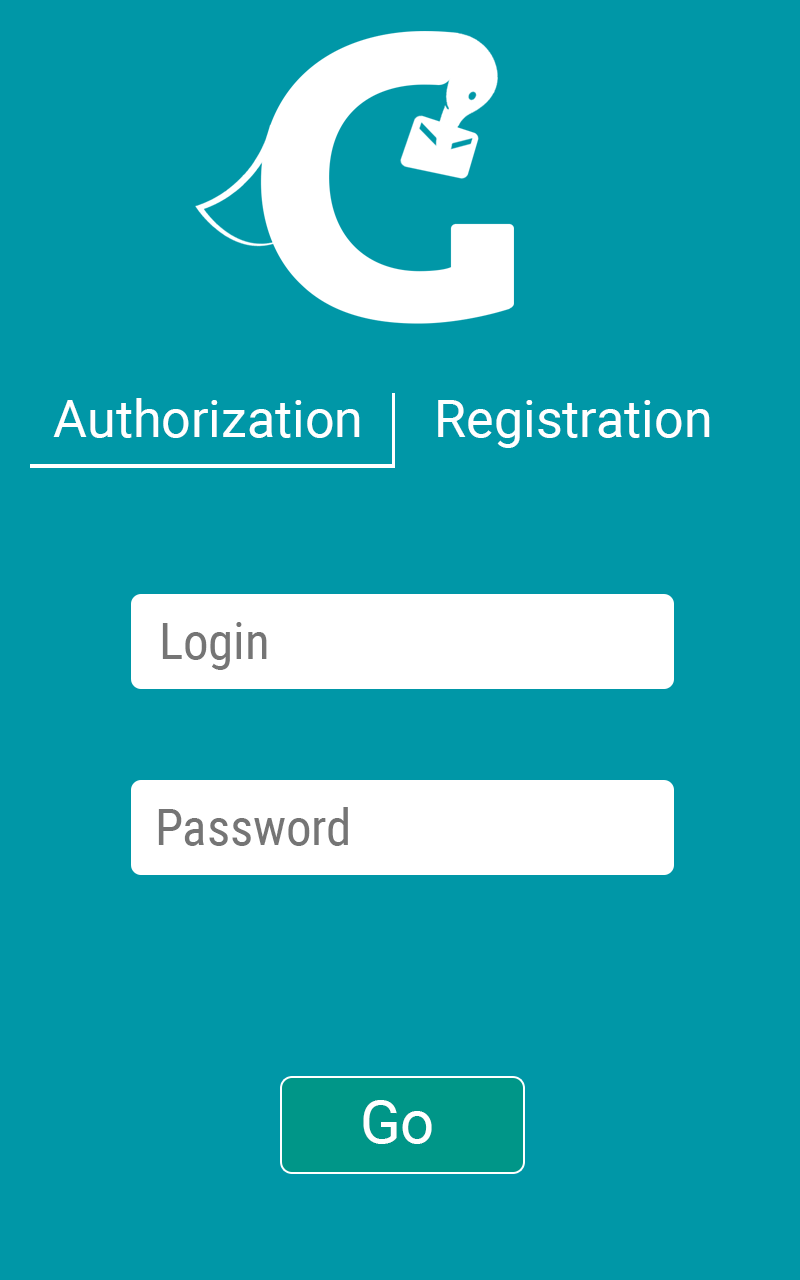
<style>
.page{position:relative;width:800px;height:1280px;background:#0097a7}
.page>*{position:absolute;margin:0}
.t1{font:52px "Roboto-Regular";color:#ffffff}
.t2{font:50.7px "RobotoCondensed-Regular";color:#757575}
.t3{font:60px "Roboto-Regular";color:#ffffff}
</style>
<div class="page">
<p class="t1" style="left:53px;top:398px;width:307px;height:40px">Authorization</p>
<p class="t1" style="left:438px;top:400px;width:272px;height:48px">Registration</p>
<p class="t2" style="left:162px;top:622px;width:105px;height:48px">Login</p>
<p class="t2" style="left:158px;top:807px;width:190px;height:39px">Password</p>
<p class="t3" style="left:363px;top:1100px;width:69px;height:44px">Go</p>
</div>
